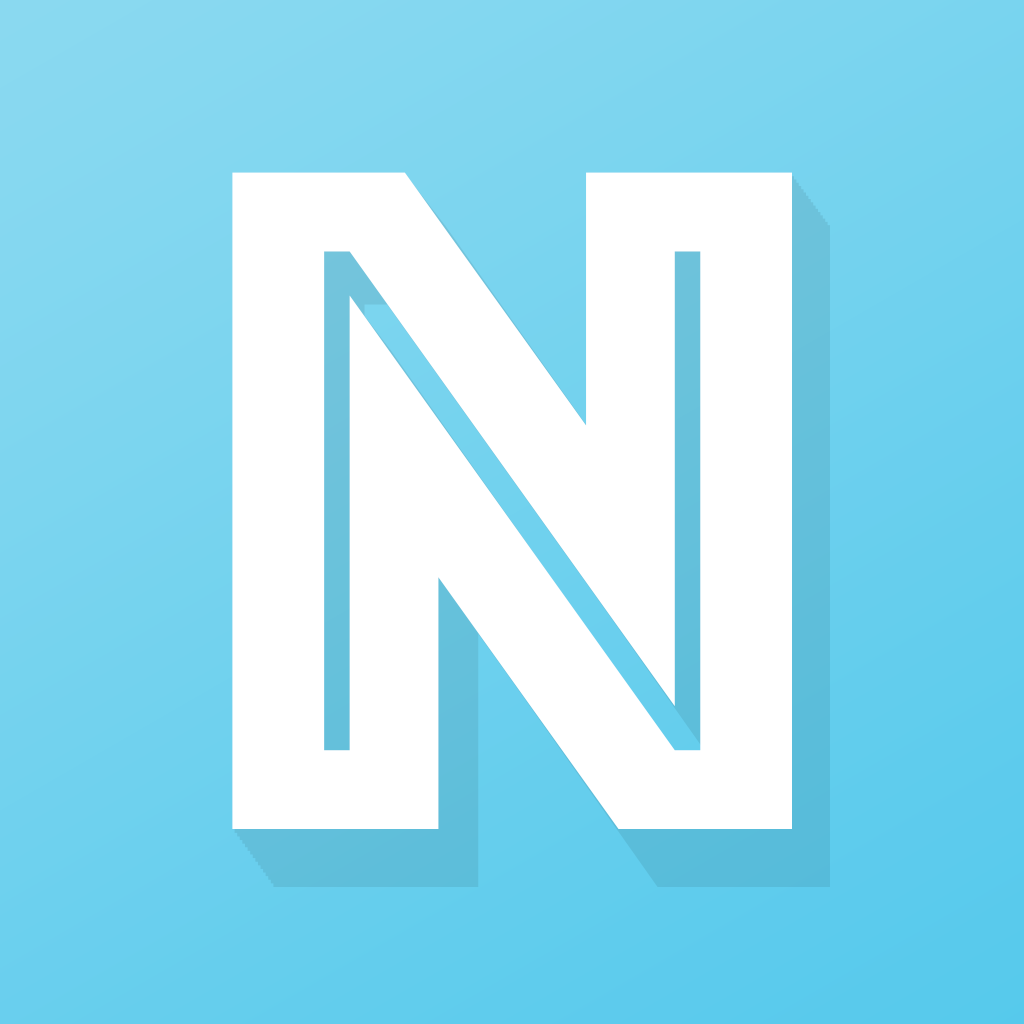
<style>
.page{position:relative;width:1024px;height:1024px;background:#ffffff}
.page>*{position:absolute;margin:0}
.t1{font:984px "Phosphate-Inline";color:#ffffff}
</style>
<div class="page">
<p class="t1" style="left:232px;top:172px;width:560px;height:657px">N</p>
</div>
